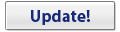
<style>
.page{position:relative;width:120px;height:32px;background:#f1f1f1}
.page>*{position:absolute;margin:0}
.t1{font:17px "MyriadPro-Bold";color:#172977}
</style>
<div class="page">
<p class="t1" style="left:31px;top:10px;width:59px;height:15px">Update!</p>
</div>
